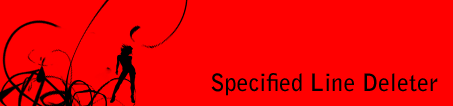
<style>
.page{position:relative;width:453px;height:106px;background:#ff0000}
.page>*{position:absolute;margin:0}
.t1{font:24px "BellGothicStd-Bold";color:#000000}
</style>
<div class="page">
<p class="t1" style="left:211px;top:73px;width:227px;height:23px">Specified Line Deleter</p>
</div>
